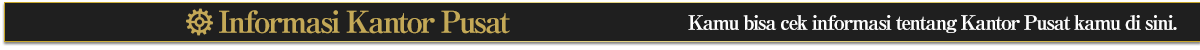
<style>
.page{position:relative;width:1200px;height:50px;background:#1f1f1f}
.page>*{position:absolute;margin:0}
.t1{font:30px "RyuminPro-ExBold";letter-spacing:-0.08em;color:#c4a957}
.t2{font:20px "RyuminPro-ExBold";letter-spacing:-0.08em;color:#ffffff}
</style>
<div class="page">
<p class="t1" style="left:219px;top:10px;width:291px;height:24px">Informasi Kantor Pusat</p>
<p class="t2" style="left:688px;top:15px;width:489px;height:18px">Kamu bisa cek informasi tentang Kantor Pusat kamu di sini.</p>
</div>
